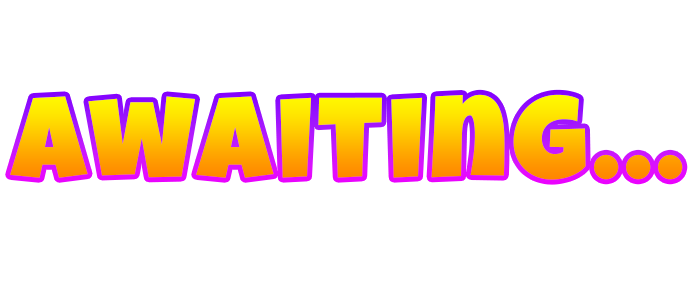
<style>
.page{position:relative;width:700px;height:300px;background:#ffffff}
.page>*{position:absolute;margin:0}
.t1{font:118.4px "LuckiestGuy-Regular";letter-spacing:0.05em}
</style>
<div class="page">
<p class="t1" style="left:10px;top:94px;width:673px;height:86px">awaiting...</p>
</div>
